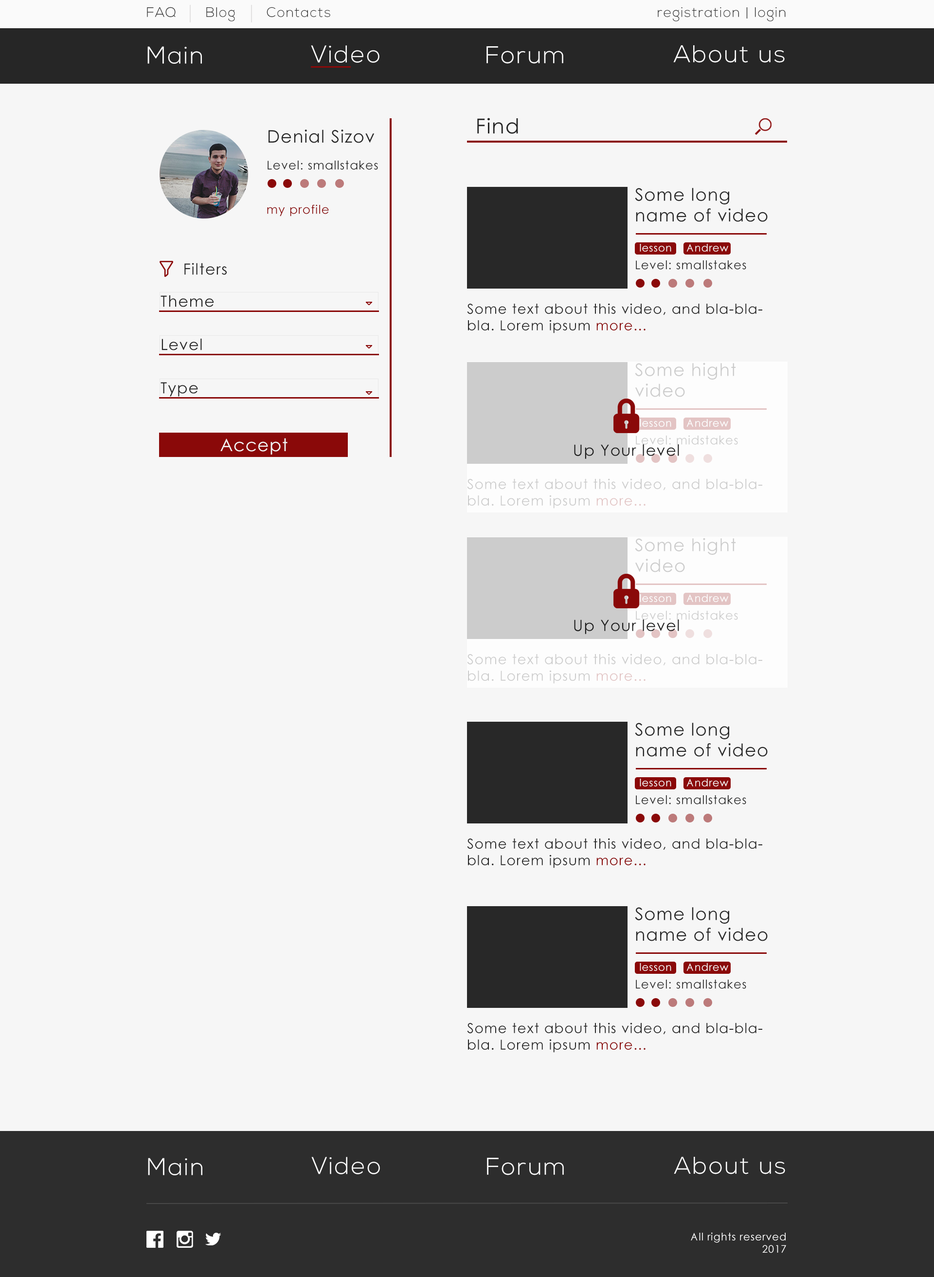
<style>
.page{position:relative;width:934px;height:1277px;background:#f6f6f6}
.page>*{position:absolute;margin:0}
.t1{font:13.8px "NexaLight";letter-spacing:0.06em;color:#303030}
.t2{font:24.1px "NexaLight";letter-spacing:0.06em;color:#fdfdfd}
.t3{font:20.7px "CenturyGothic";letter-spacing:0.05em;color:#262626}
.t4{font:17.2px "CenturyGothic";letter-spacing:0.05em;color:#262626}
.t5{font:12.1px "CenturyGothic";letter-spacing:0.05em;color:#262626}
.t6{font:17.2px "CenturyGothic";letter-spacing:0.05em;color:#282828}
.t7{font:12.1px "CenturyGothic";letter-spacing:0.05em;color:#8a0909}
.t8{font:10.3px "CenturyGothic";letter-spacing:0.05em;color:#fefefe}
.t9{font:15.5px "CenturyGothic";letter-spacing:0.05em;color:#262626}
.t10{font:13.8px "CenturyGothic";letter-spacing:0.05em;color:#282828}
.t11{font:13.8px "CenturyGothic";letter-spacing:0.05em;color:#8a0909}
.t12{font:17.2px "CenturyGothic";letter-spacing:0.05em;color:#cccccc}
.t13{font:17.2px "CenturyGothic";letter-spacing:0.05em;color:#f6f6f6}
.t14{font:12.1px "CenturyGothic";letter-spacing:0.05em;color:#cbcbcb}
.t15{font:15.5px "CenturyGothic";letter-spacing:0.05em;color:#1b1b1b}
.t16{font:13.8px "CenturyGothic";letter-spacing:0.05em;color:#cccccc}
.t17{font:10.3px "CenturyGothic";letter-spacing:0.05em;color:#ffffff}
</style>
<div class="page">
<p class="t1" style="left:147px;top:7px;width:29px;height:10px">FAQ</p>
<p class="t1" style="left:206px;top:7px;width:29px;height:14px">Blog</p>
<p class="t1" style="left:267px;top:7px;width:63px;height:10px">Contacts</p>
<p class="t1" style="left:658px;top:7px;width:128px;height:14px">registration | login</p>
<p class="t2" style="left:147px;top:46px;width:55px;height:18px">Main</p>
<p class="t2" style="left:311px;top:45px;width:68px;height:18px">Video</p>
<p class="t2" style="left:487px;top:46px;width:76px;height:18px">Forum</p>
<p class="t2" style="left:673px;top:45px;width:112px;height:18px">About us</p>
<p class="t3" style="left:477px;top:118px;width:41px;height:16px">Find</p>
<p class="t4" style="left:269px;top:129px;width:106px;height:14px">Denial Sizov</p>
<p class="t5" style="left:268px;top:161px;width:110px;height:9px">Level: smallstakes</p>
<p class="t6" style="left:635px;top:188px;width:133px;height:34px">Some long name of video</p>
<p class="t7" style="left:267px;top:204px;width:62px;height:12px">my profile</p>
<p class="t8" style="left:640px;top:244px;width:31px;height:8px">lesson</p>
<p class="t8" style="left:686px;top:244px;width:42px;height:8px">Andrew</p>
<p class="t9" style="left:184px;top:263px;width:43px;height:12px">Filters</p>
<p class="t5" style="left:636px;top:260px;width:110px;height:10px">Level: smallstakes</p>
<p class="t9" style="left:161px;top:295px;width:53px;height:12px">Theme</p>
<p class="t10" style="left:467px;top:303px;width:295px;height:30px">Some text about this video, and bla-bla- bla. Lorem ipsum <span class="t11">more...</span></p>
<p class="t9" style="left:162px;top:338px;width:40px;height:12px">Level</p>
<p class="t12" style="left:635px;top:362px;width:101px;height:35px">Some hight video</p>
<p class="t9" style="left:161px;top:382px;width:37px;height:14px">Type</p>
<p class="t8" style="left:640px;top:419px;width:31px;height:8px">lesson</p>
<p class="t8" style="left:686px;top:419px;width:42px;height:8px">Andrew</p>
<p class="t13" style="left:220px;top:438px;width:68px;height:16px">Accept</p>
<p class="t14" style="left:636px;top:435px;width:102px;height:10px">Level: midstakes</p>
<p class="t15" style="left:574px;top:444px;width:105px;height:15px">Up Your level</p>
<p class="t16" style="left:467px;top:478px;width:295px;height:30px">Some text about this video, and bla-bla- bla. Lorem ipsum more...</p>
<p class="t12" style="left:635px;top:538px;width:101px;height:34px">Some hight video</p>
<p class="t8" style="left:640px;top:594px;width:31px;height:8px">lesson</p>
<p class="t8" style="left:686px;top:594px;width:42px;height:8px">Andrew</p>
<p class="t14" style="left:636px;top:610px;width:102px;height:10px">Level: midstakes</p>
<p class="t15" style="left:574px;top:619px;width:105px;height:15px">Up Your level</p>
<p class="t16" style="left:467px;top:653px;width:295px;height:31px">Some text about this video, and bla-bla- bla. Lorem ipsum more...</p>
<p class="t6" style="left:635px;top:722px;width:133px;height:35px">Some long name of video</p>
<p class="t8" style="left:640px;top:778px;width:31px;height:8px">lesson</p>
<p class="t8" style="left:686px;top:778px;width:42px;height:8px">Andrew</p>
<p class="t5" style="left:636px;top:795px;width:110px;height:9px">Level: smallstakes</p>
<p class="t10" style="left:467px;top:838px;width:295px;height:30px">Some text about this video, and bla-bla- bla. Lorem ipsum <span class="t11">more...</span></p>
<p class="t6" style="left:635px;top:907px;width:133px;height:34px">Some long name of video</p>
<p class="t8" style="left:640px;top:963px;width:31px;height:8px">lesson</p>
<p class="t8" style="left:686px;top:963px;width:42px;height:8px">Andrew</p>
<p class="t5" style="left:636px;top:979px;width:110px;height:10px">Level: smallstakes</p>
<p class="t10" style="left:467px;top:1022px;width:295px;height:30px">Some text about this video, and bla-bla- bla. Lorem ipsum <span class="t11">more...</span></p>
<p class="t2" style="left:148px;top:1157px;width:54px;height:18px">Main</p>
<p class="t2" style="left:311px;top:1156px;width:69px;height:18px">Video</p>
<p class="t2" style="left:487px;top:1157px;width:77px;height:18px">Forum</p>
<p class="t2" style="left:674px;top:1156px;width:111px;height:18px">About us</p>
<p class="t17" style="left:691px;top:1232px;width:95px;height:21px;text-align:right">All rights reserved<br>2017</p>
</div>
